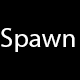
<style>
.page{position:relative;width:80px;height:80px;background:#000000}
.page>*{position:absolute;margin:0}
.t1{font:27px "MyriadPro-Regular";color:#ffffff}
</style>
<div class="page">
<p class="t1" style="left:1px;top:28px;width:74px;height:24px">Spawn</p>
</div>
